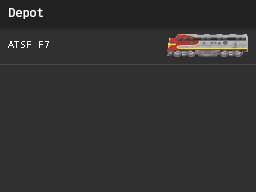
<style>
.page{position:relative;width:256px;height:192px;background:#303030}
.page>*{position:absolute;margin:0}
.t1{font:12px "FiraMono-Regular";color:#ffffff}
.t2{font:10px "DroidSansMono";color:#ffffff}
</style>
<div class="page">
<p class="t1" style="left:9px;top:8px;width:34px;height:11px">Depot</p>
<p class="t2" style="left:8px;top:41px;width:41px;height:7px">ATSF F7</p>
</div>
